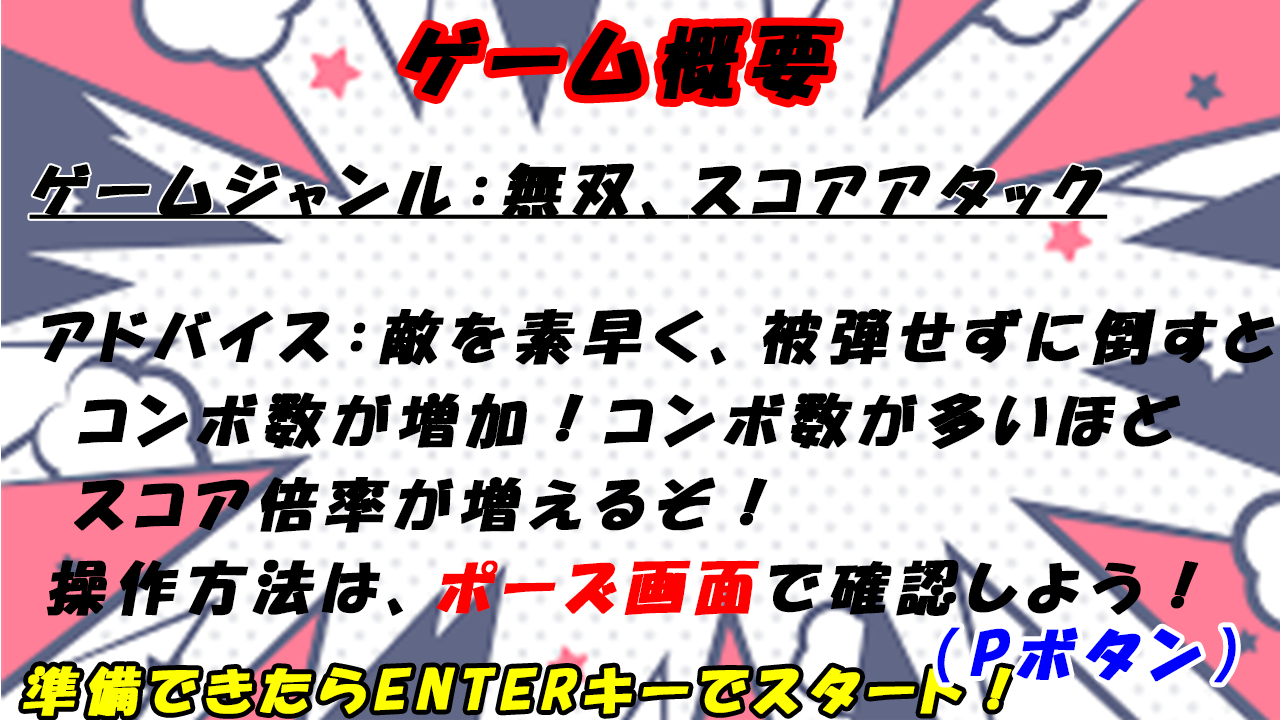
<style>
.page{position:relative;width:1280px;height:720px;background:#ffffff}
.page>*{position:absolute;margin:0}
.t1{font:76.8px "HGPSoeiKakupoptai";letter-spacing:0.17em;color:#000000;font-weight:bold;font-style:italic}
.t2{font:57.6px "HGPSoeiKakupoptai";letter-spacing:0.17em;color:#010100;font-weight:bold;font-style:italic;text-decoration:underline}
.t3{font:57.6px "HGPSoeiKakupoptai";letter-spacing:0.17em;color:#000000;font-weight:bold;font-style:italic}
.t4{font:57.6px "HGPSoeiKakupoptai";letter-spacing:0.17em;color:#ff0000;font-weight:bold;font-style:italic}
.t5{font:57.6px "HGPSoeiKakupoptai";letter-spacing:0.17em;color:#0000ff;font-weight:bold;font-style:italic}
.t6{font:51.2px "HGPSoeiKakupoptai";letter-spacing:0.17em;color:#ffff00;font-weight:bold;font-style:italic}
</style>
<div class="page">
<p class="t1" style="left:405px;top:25px;width:431px;height:75px">ゲーム概要</p>
<p class="t2" style="left:29px;top:162px;width:1079px;height:57px">ゲームジャンル：無双、スコアアタック</p>
<p class="t3" style="left:46px;top:559px;width:1153px;height:57px">操作方法は、<span class="t4">ポーズ画面</span>で確認しよう！</p>
<p class="t5" style="left:937px;top:627px;width:299px;height:56px">（Pボタン）</p>
<p class="t6" style="left:23px;top:666px;width:989px;height:50px">準備できたらENTERキーでスタート！</p>
</div>
